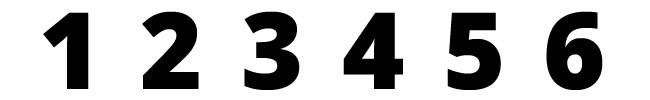
<style>
.page{position:relative;width:650px;height:100px;background:#ffffff}
.page>*{position:absolute;margin:0}
.t1{font:106.7px "OpenSans-Extrabold";letter-spacing:0.05em;color:#000000}
</style>
<div class="page">
<p class="t1" style="left:43px;top:11px;width:560px;height:79px">1 2 3 4 5 6</p>
</div>
